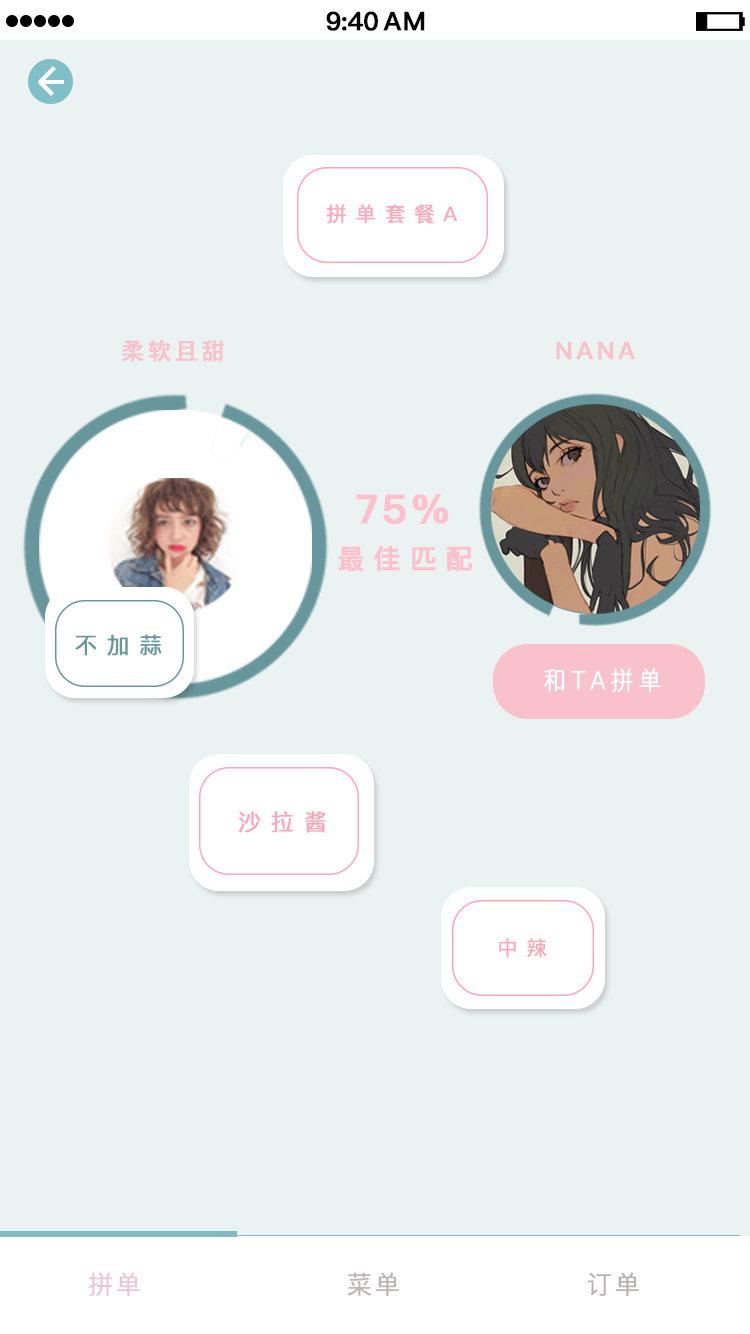
<style>
.page{position:relative;width:750px;height:1334px;background:#ebf2f2}
.page>*{position:absolute;margin:0}
.t1{font:25.4px "PingFang-SC-Bold";letter-spacing:-0.028em;color:#000000;font-weight:bold}
.t2{font:25.4px "PingFang-SC-Bold";letter-spacing:0.052em;color:#000000;font-weight:bold}
.t3{font:20.4px "PingFang-SC-Medium";letter-spacing:0.412em;color:#ffa5b7;font-weight:bold}
.t4{font:23px "PingFang-SC-Bold";letter-spacing:0.143em;color:#f8c1cc;font-weight:bold}
.t5{font:24px "PingFang-SC-Bold";letter-spacing:0.143em;color:#f8c1cc;font-weight:bold}
.t6{font:40px "PingFang-SC-Heavy";letter-spacing:0.072em;color:#ffbfcc;font-weight:bold}
.t7{font:27px "PingFang-SC-Bold";letter-spacing:0.312em;color:#ffbfcc;font-weight:bold}
.t8{font:22.6px "PingFang-SC-Medium";letter-spacing:0.412em;color:#67979c;font-weight:bold}
.t9{font:25.2px "PingFang-SC-Regular";letter-spacing:0.212em;color:#ffffff;font-weight:bold;scale:0.89 1}
.t10{font:22.9px "PingFang-SC-Medium";letter-spacing:0.412em;color:#ffa5b7;font-weight:bold}
.t11{font:25px "PingFang-SC-Regular";letter-spacing:0.085em;color:#ecc6d7;font-weight:bold}
.t12{font:25px "PingFang-SC-Regular";letter-spacing:0.085em;color:#bbb5b5;font-weight:bold}
.t13{font:25px "PingFang-SC-Regular";letter-spacing:0.085em;color:#b7b1b1;font-weight:bold}
</style>
<div class="page">
<p class="t1" style="left:326px;top:11px;width:52px;height:20px">9:40</p>
<p class="t2" style="left:383px;top:11px;width:42px;height:20px">AM</p>
<p class="t3" style="left:326px;top:204px;width:131px;height:20px">拼单套餐A</p>
<p class="t4" style="left:121px;top:339px;width:103px;height:23px">柔软且甜</p>
<p class="t5" style="left:556px;top:341px;width:79px;height:19px">NANA</p>
<p class="t6" style="left:356px;top:494px;width:93px;height:30px">75%</p>
<p class="t7" style="left:338px;top:545px;width:135px;height:27px">最佳匹配</p>
<p class="t8" style="left:75px;top:634px;width:87px;height:22px">不加蒜</p>
<p class="t9" style="left:544px;top:668px;width:117px;height:25px">和TA拼单</p>
<p class="t10" style="left:238px;top:811px;width:88px;height:22px">沙拉酱</p>
<p class="t3" style="left:499px;top:938px;width:48px;height:20px">中辣</p>
<p class="t11" style="left:88px;top:1272px;width:52px;height:24px">拼单</p>
<p class="t12" style="left:348px;top:1272px;width:51px;height:24px">菜单</p>
<p class="t13" style="left:587px;top:1272px;width:52px;height:24px">订单</p>
</div>
